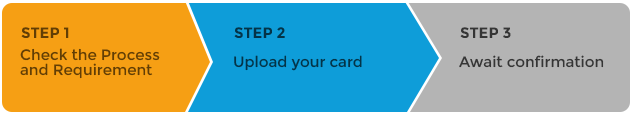
<style>
.page{position:relative;width:634px;height:117px;background:#0e9dd9}
.page>*{position:absolute;margin:0}
.t1{font:15px "Montserrat-Bold";color:#623e05;text-transform:uppercase}
.t2{font:15px "Montserrat-Bold";color:#043448;text-transform:uppercase}
.t3{font:15px "Montserrat-Bold";color:#353535;text-transform:uppercase}
.t4{font:15px/15px "Montserrat-Regular";color:#623e05}
.t5{font:15px "Montserrat-Regular";color:#043448}
.t6{font:15px "Montserrat-Regular";color:#353535}
</style>
<div class="page">
<p class="t1" style="left:21px;top:27px;width:48px;height:11px">Step 1</p>
<p class="t2" style="left:234px;top:27px;width:51px;height:11px">Step 2</p>
<p class="t3" style="left:460px;top:27px;width:51px;height:11px">Step 3</p>
<p class="t4" style="left:20px;top:48px;width:140px;height:31px">Check the Process <br>and Requirement</p>
<p class="t5" style="left:234px;top:55px;width:128px;height:16px">Upload your card</p>
<p class="t6" style="left:459px;top:55px;width:145px;height:13px">Await confirmation</p>
</div>
